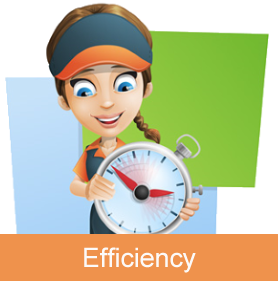
<style>
.page{position:relative;width:278px;height:281px}
.page>*{position:absolute;margin:0}
.t1{font:26.7px "ArialMT";color:#fcfaf9}
</style>
<div class="page">
<p class="t1" style="left:84px;top:247px;width:112px;height:26px">Efficiency</p>
</div>
